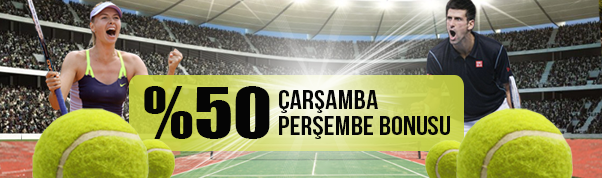
<style>
.page{position:relative;width:602px;height:178px}
.page>*{position:absolute;margin:0}
.t1{font:64.6px "Impact";color:#050505;text-transform:uppercase;scale:1.12 1}
.t2{font:26.7px/26.3px "BebasNeue";color:#050505;text-transform:uppercase;scale:1.12 1}
</style>
<div class="page">
<p class="t1" style="left:144px;top:86px;width:126px;height:53px">%50</p>
<p class="t2" style="left:279px;top:90px;width:171px;height:49px">Çarşamba<br>perşembe bonusu</p>
</div>
